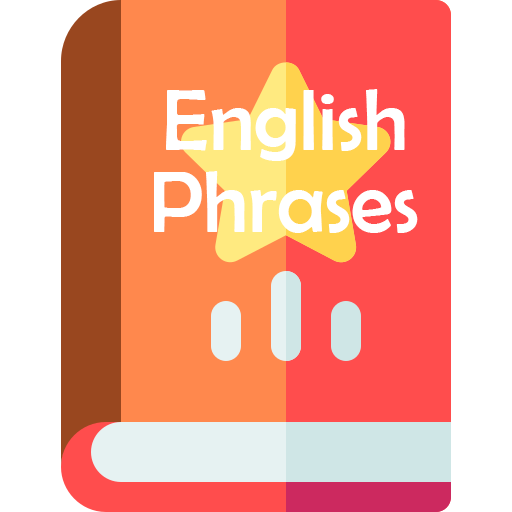
<style>
.page{position:relative;width:512px;height:512px;background:#ffffff}
.page>*{position:absolute;margin:0}
.t1{font:86.7px "BerlinSansFB-Reg";color:#ffffff}
</style>
<div class="page">
<p class="t1" style="left:166px;top:89px;width:239px;height:72px">English</p>
<p class="t1" style="left:154px;top:171px;width:264px;height:62px">Phrases</p>
</div>
